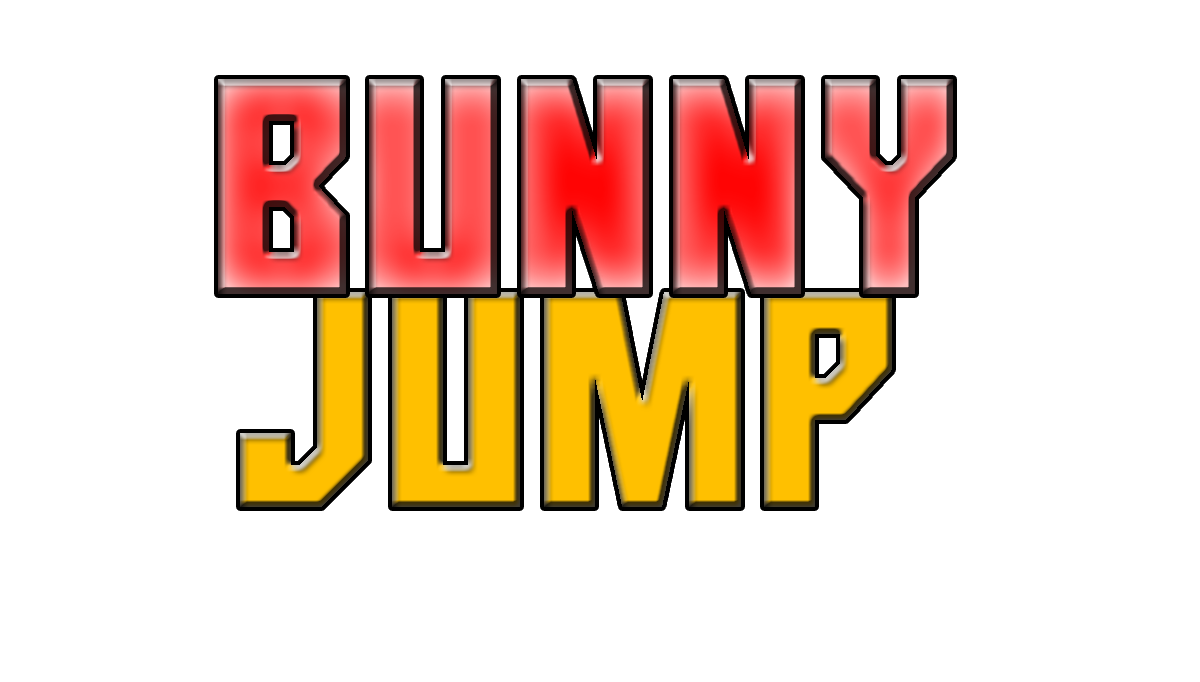
<style>
.page{position:relative;width:1200px;height:682px;background:#ffffff}
.page>*{position:absolute;margin:0}
.t1{font:300px "No-Continue"}
.t2{font:300px "No-Continue";color:#ffc000}
</style>
<div class="page">
<p class="t1" style="left:218px;top:79px;width:735px;height:215px">BUNNY</p>
<p class="t2" style="left:240px;top:292px;width:652px;height:215px">jump</p>
</div>
